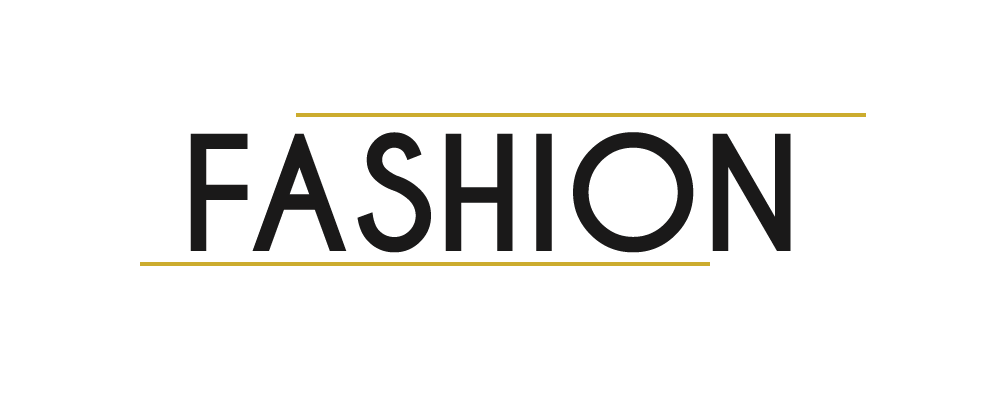
<style>
.page{position:relative;width:1000px;height:400px;background:#ffffff}
.page>*{position:absolute;margin:0}
.t1{font:150px "CaviarDreams-Bold";color:#1a1919}
</style>
<div class="page">
<p class="t1" style="left:190px;top:132px;width:601px;height:121px">FASHION</p>
</div>
